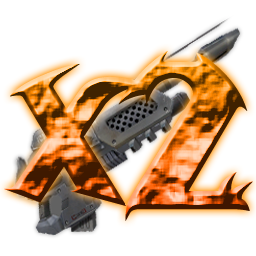
<style>
.page{position:relative;width:256px;height:256px;background:#ffffff}
.page>*{position:absolute;margin:0}
.t1{font:211.1px "UnrealTournament";scale:0.88 1}
</style>
<div class="page">
<p class="t1" style="left:4px;top:50px;width:249px;height:171px">x2</p>
</div>
